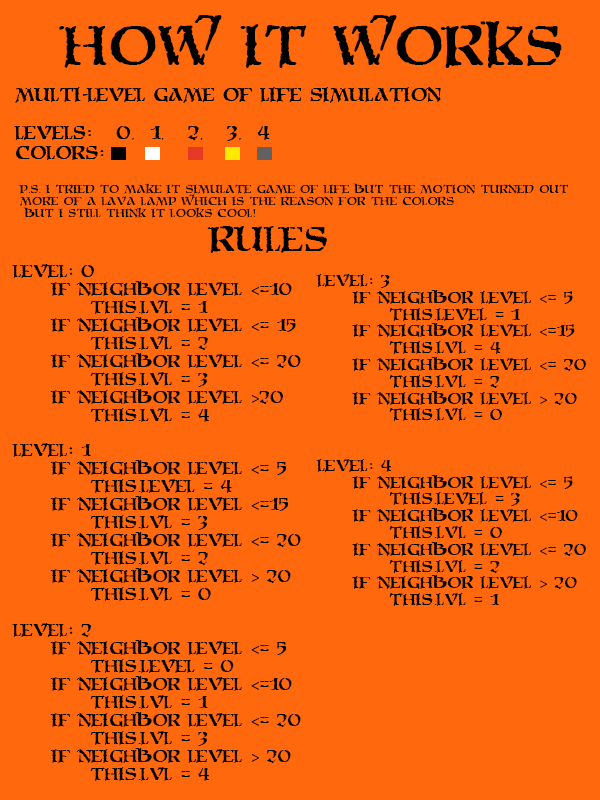
<style>
.page{position:relative;width:600px;height:800px;background:#ff680d}
.page>*{position:absolute;margin:0}
.t1{font:48px "MoriaCitadel";color:#000000}
.t2{font:10px "MoriaCitadel";color:#000000}
.t3{font:30px "MoriaCitadel";color:#000000}
.t4{font:15px "MoriaCitadel";color:#000000}
.t5{font:15px "MyriadPro-Regular";color:#000000}
.t6{font:14px "MoriaCitadel";color:#000000}
.t7{font:14px "MyriadPro-Regular";color:#000000}
</style>
<div class="page">
<p class="t1" style="left:59px;top:15px;width:503px;height:53px">How it workS</p>
<p class="t2" style="left:18px;top:183px;width:550px;height:35px">P.S. I tried to make it simulate game of life but the motion turned out<br>more of a lava lamp which is the reason for the colors<br> but i still think it looks cool!</p>
<p class="t3" style="left:207px;top:226px;width:120px;height:27px">RULES</p>
<p class="t4" style="left:12px;top:264px;width:289px;height:517px">Level: 0<br> If neighbor level <span class="t5">&lt;</span>=10<br>  this.lvl = 1<br> If neighbor level <span class="t5">&lt;</span>= 15<br>  this.lvl = 2<br> If neighbor level <span class="t5">&lt;</span>= 20<br>  this.lvl = 3<br> if neighbor level <span class="t5">&gt;</span>20<br>  this.lvl = 4<br><br>Level: 1<br> If neighbor level <span class="t5">&lt;</span>= 5<br>  this.level = 4<br> if neighbor level <span class="t5">&lt;</span>=15<br>  this.lvl = 3<br> if neighbor level <span class="t5">&lt;</span>= 20<br>  this.lvl = 2<br> if neighbor level <span class="t5">&gt;</span> 20<br>  this.lvl = 0<br><br>Level: 2 <br> If neighbor level <span class="t5">&lt;</span>= 5<br>  this.level = 0<br> if neighbor level <span class="t5">&lt;</span>=10<br>  this.lvl = 1<br> if neighbor level <span class="t5">&lt;</span>= 20<br>  this.lvl = 3<br> if neighbor level <span class="t5">&gt;</span> 20<br>  this.lvl = 4</p>
<p class="t6" style="left:316px;top:274px;width:270px;height:332px">Level: 3 <br> If neighbor level <span class="t7">&lt;</span>= 5<br>  this.level = 1<br> if neighbor level <span class="t7">&lt;</span>=15<br>  this.lvl = 4<br> if neighbor level <span class="t7">&lt;</span>= 20<br>  this.lvl = 2<br> if neighbor level <span class="t7">&gt;</span> 20<br>  this.lvl = 0<br><br><br>Level: 4 <br> If neighbor level <span class="t7">&lt;</span>= 5<br>  this.level = 3<br> if neighbor level <span class="t7">&lt;</span>=10<br>  this.lvl = 0<br> if neighbor level <span class="t7">&lt;</span>= 20<br>  this.lvl = 2<br> if neighbor level <span class="t7">&gt;</span> 20<br>  this.lvl = 1</p>
</div>
